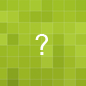
<style>
.page{position:relative;width:86px;height:86px}
.page>*{position:absolute;margin:0}
.t1{font:28.4px "Helvetica";letter-spacing:0.035em;color:#ffffff;text-transform:uppercase}
</style>
<div class="page">
<p class="t1" style="left:35px;top:34px;width:13px;height:21px">?</p>
</div>
